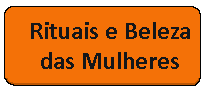
<style>
.page{position:relative;width:206px;height:91px;background:#f47107}
.page>*{position:absolute;margin:0}
.t1{font:25px "Calibri-Bold";color:#141619}
</style>
<div class="page">
<p class="t1" style="left:31px;top:22px;width:159px;height:47px;text-align:center">Rituais e Beleza das Mulheres</p>
</div>
